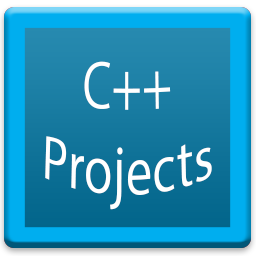
<style>
.page{position:relative;width:256px;height:256px}
.page>*{position:absolute;margin:0}
.t1{font:12px "MyriadPro-Regular";color:#ffffff}
</style>
<div class="page">
<p class="t1" style="left:45px;top:61px;width:167px;height:149px;text-align:center">C++<br>Projects</p>
</div>
